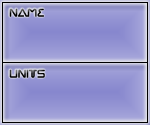
<style>
.page{position:relative;width:150px;height:125px}
.page>*{position:absolute;margin:0}
.t1{font:12px "Chilopod-Regular"}
</style>
<div class="page">
<p class="t1" style="left:9px;top:8px;width:35px;height:9px">NAME</p>
<p class="t1" style="left:9px;top:69px;width:36px;height:9px">Units</p>
</div>
